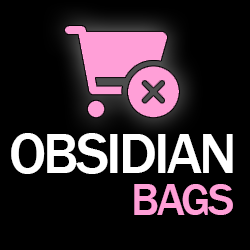
<style>
.page{position:relative;width:250px;height:250px;background:#000000}
.page>*{position:absolute;margin:0}
.t1{font:58.3px "FranklinGothic-Medium";letter-spacing:-0.05em;color:#ffffff}
.t2{font:45.8px "FranklinGothic-Medium";letter-spacing:-0.05em;color:#ff9fd7}
</style>
<div class="page">
<p class="t1" style="left:11px;top:133px;width:222px;height:41px">OBSIDIAN</p>
<p class="t2" style="left:134px;top:184px;width:99px;height:31px">BAGS</p>
</div>
